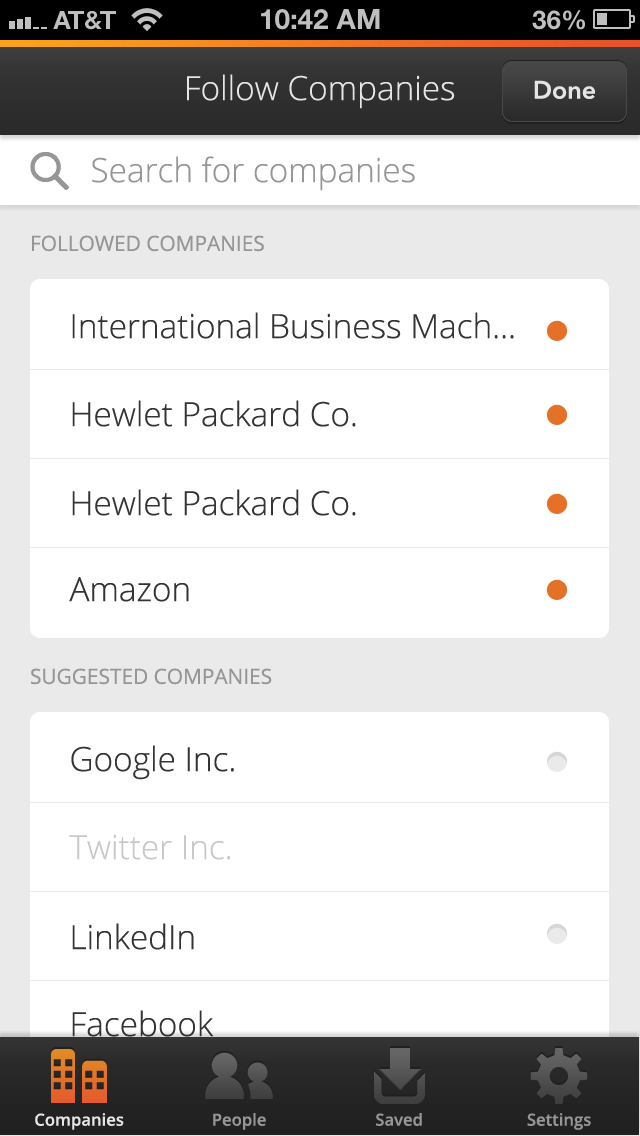
<style>
.page{position:relative;width:640px;height:1136px;background:#ffffff}
.page>*{position:absolute;margin:0}
.t1{font:33.3px "OpenSans-Light";color:#e5e5e5}
.t2{font:25px "AvenirNext-DemiBold";color:#e5e5e5}
.t3{font:33.3px "OpenSans-Light";color:#969696}
.t4{font:20.8px "OpenSans";color:#969696}
.t5{font:33.3px "OpenSans-Light";color:#343434}
.t6{font:33.3px "OpenSans-Light";color:#c8c8c8}
.t7{font:16.7px "OpenSans-Semibold";color:#e5e5e5}
.t8{font:16.7px "OpenSans-Semibold";color:#969696}
</style>
<div class="page">
<p class="t1" style="left:187px;top:74px;width:268px;height:35px">Follow Companies</p>
<p class="t2" style="left:534px;top:80px;width:61px;height:19px">Done</p>
<p class="t3" style="left:92px;top:156px;width:323px;height:35px">Search for companies</p>
<p class="t4" style="left:32px;top:235px;width:232px;height:17px">FOLLOWED COMPANIES</p>
<p class="t5" style="left:72px;top:312px;width:442px;height:27px">International Business Mach...</p>
<p class="t5" style="left:72px;top:400px;width:284px;height:27px">Hewlet Packard Co.</p>
<p class="t5" style="left:72px;top:489px;width:284px;height:27px">Hewlet Packard Co.</p>
<p class="t5" style="left:69px;top:577px;width:120px;height:25px">Amazon</p>
<p class="t4" style="left:31px;top:668px;width:241px;height:17px">SUGGESTED COMPANIES</p>
<p class="t5" style="left:71px;top:745px;width:163px;height:35px">Google Inc.</p>
<p class="t6" style="left:69px;top:834px;width:161px;height:26px">Twitter Inc.</p>
<p class="t5" style="left:72px;top:923px;width:122px;height:27px">LinkedIn</p>
<p class="t5" style="left:72px;top:1010px;width:142px;height:27px">Facebook</p>
<p class="t7" style="left:35px;top:1113px;width:89px;height:17px">Companies</p>
<p class="t8" style="left:213px;top:1113px;width:53px;height:17px">People</p>
<p class="t8" style="left:376px;top:1113px;width:46px;height:13px">Saved</p>
<p class="t8" style="left:527px;top:1113px;width:64px;height:17px">Settings</p>
</div>
